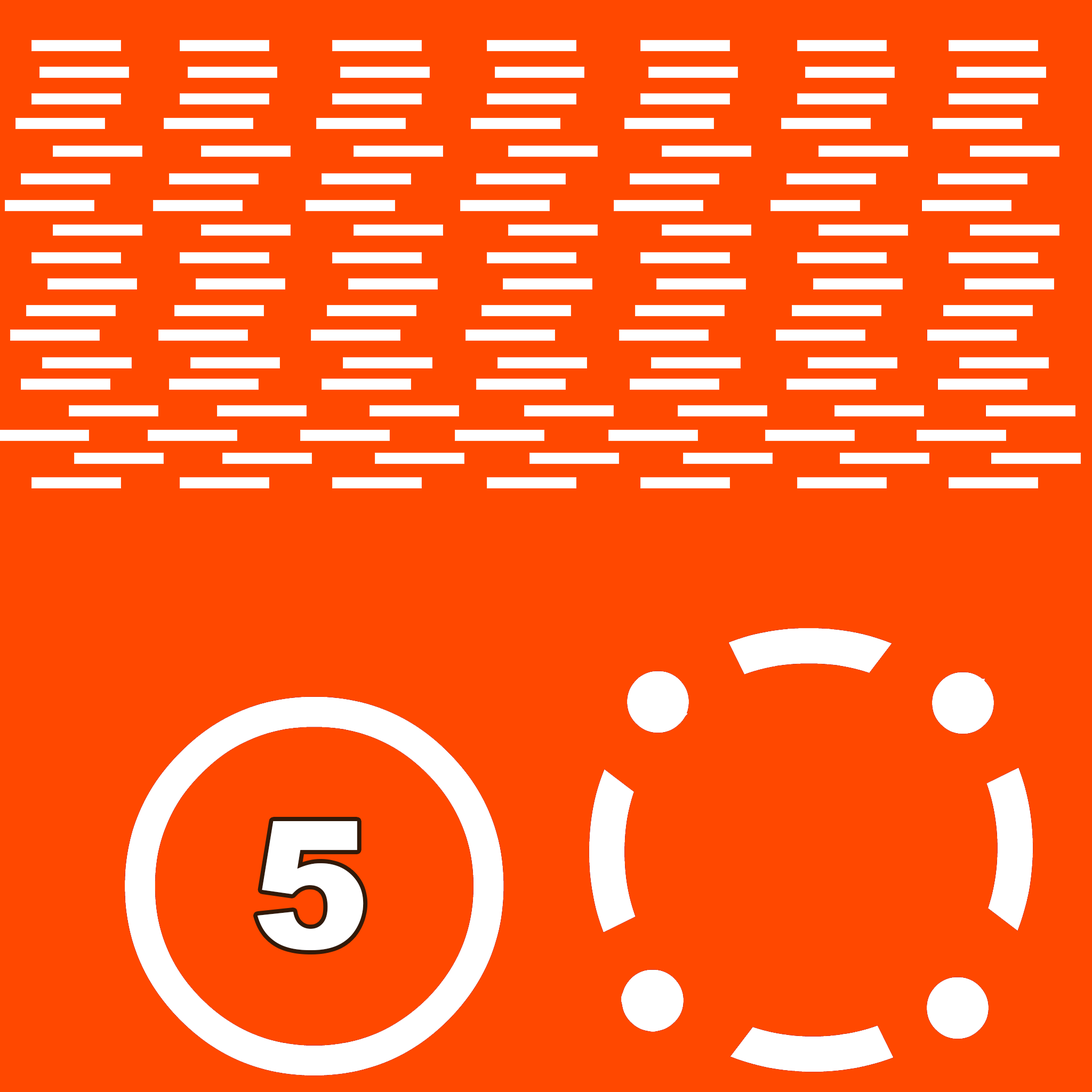
<style>
.page{position:relative;width:1092px;height:1092px;background:#ff4800}
.page>*{position:absolute;margin:0}
.t1{font:177.7px "Arial-Black";color:#ffffff}
</style>
<div class="page">
<p class="t1" style="left:257px;top:821px;width:107px;height:129px">5</p>
</div>
